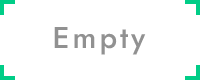
<style>
.page{position:relative;width:200px;height:80px;background:#ffffff}
.page>*{position:absolute;margin:0}
.t1{font:30px "Jost-Medium";letter-spacing:0.1em;color:#919191}
</style>
<div class="page">
<p class="t1" style="left:54px;top:27px;width:92px;height:28px">Empty</p>
</div>
